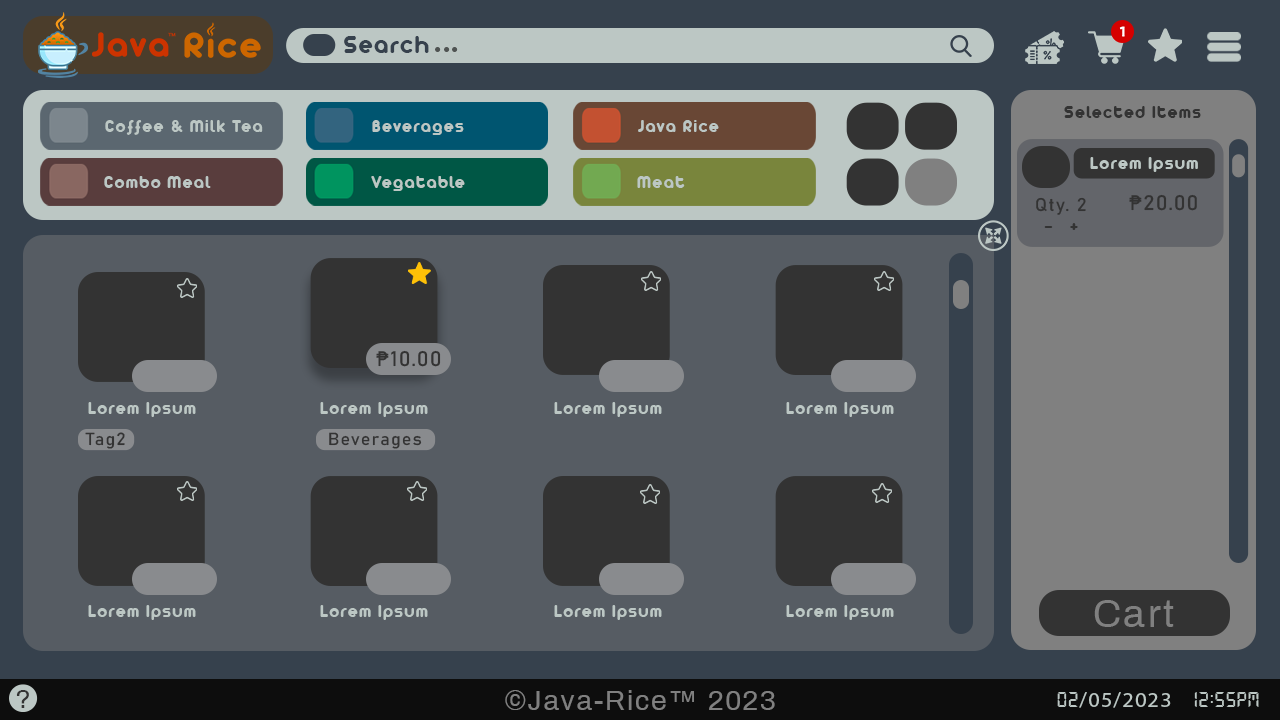
<style>
.page{position:relative;width:1280px;height:720px;background:#565c63}
.page>*{position:absolute;margin:0}
.t1{font:25.7px "Arista";letter-spacing:0.06em;color:#36414d;scale:1.04 1}
.t2{font:37.5px "Arista";letter-spacing:0.06em;color:#4f5352}
.t3{font:18.7px "Arista";letter-spacing:0.06em;color:#333333;scale:1.04 1}
.t4{font:18.7px "Arista";letter-spacing:0.06em;color:#bcc7c4;scale:1.04 1}
.t5{font:18.3px "Bahnschrift";letter-spacing:0.06em;color:#333333;scale:1.04 1}
.t6{font:20.8px "Bahnschrift";letter-spacing:0.06em;color:#333333;scale:1.04 1}
.t7{font:18.3px "Arista";letter-spacing:0.06em;color:#333333;scale:1.04 1}
.t8{font:18.5px "Arista";letter-spacing:0.06em;color:#bcc7c4;scale:1.04 1}
.t9{font:17.4px "Bahnschrift";letter-spacing:0.06em;color:#333333;scale:1.04 1}
.t10{font:37.5px "Archivo-Regular";letter-spacing:0.06em;color:#808080;scale:1.04 1}
.t11{font:26.3px "Archivo-Regular";letter-spacing:0.06em;color:#333333;scale:1.04 1}
.t12{font:27.2px "Archivo-Regular";letter-spacing:0.06em;color:#808080;scale:1.04 1}
.t13{font:21.2px "MyriadPro-Regular";letter-spacing:0.06em;color:#bcc7c4;scale:1.04 1}
.t14{font:21.2px "Technology-Regular";letter-spacing:0.06em;color:#bcc7c4;scale:1.04 1}
</style>
<div class="page">
<p class="t1" style="left:344px;top:36px;width:85px;height:17px">Search</p>
<p class="t2" style="left:435px;top:47px;width:23px;height:5px">...</p>
<p class="t3" style="left:1064px;top:106px;width:137px;height:12px">Selected Items</p>
<p class="t4" style="left:105px;top:120px;width:158px;height:15px">Coffee &amp; Milk Tea</p>
<p class="t4" style="left:372px;top:120px;width:92px;height:15px">Beverages</p>
<p class="t4" style="left:638px;top:120px;width:81px;height:12px">Java Rice</p>
<p class="t4" style="left:1090px;top:157px;width:108px;height:15px">Lorem Ipsum</p>
<p class="t4" style="left:104px;top:176px;width:107px;height:12px">Combo Meal</p>
<p class="t4" style="left:371px;top:176px;width:94px;height:15px">Vegatable</p>
<p class="t4" style="left:637px;top:176px;width:48px;height:12px">Meat</p>
<p class="t5" style="left:1036px;top:197px;width:50px;height:18px">Qty. 2</p>
<p class="t6" style="left:1129px;top:194px;width:68px;height:17px">₱20.00</p>
<p class="t7" style="left:1044px;top:223px;width:34px;height:7px">-   +</p>
<p class="t6" style="left:376px;top:350px;width:65px;height:17px">₱10.00</p>
<p class="t8" style="left:88px;top:402px;width:108px;height:15px">Lorem Ipsum</p>
<p class="t8" style="left:320px;top:402px;width:108px;height:15px">Lorem Ipsum</p>
<p class="t8" style="left:554px;top:402px;width:108px;height:15px">Lorem Ipsum</p>
<p class="t8" style="left:786px;top:402px;width:108px;height:15px">Lorem Ipsum</p>
<p class="t9" style="left:85px;top:432px;width:40px;height:17px">Tag2</p>
<p class="t9" style="left:329px;top:432px;width:93px;height:17px">Beverages</p>
<p class="t8" style="left:88px;top:605px;width:108px;height:15px">Lorem Ipsum</p>
<p class="t8" style="left:320px;top:605px;width:108px;height:15px">Lorem Ipsum</p>
<p class="t8" style="left:554px;top:605px;width:108px;height:15px">Lorem Ipsum</p>
<p class="t8" style="left:786px;top:605px;width:108px;height:15px">Lorem Ipsum</p>
<p class="t10" style="left:1094px;top:600px;width:80px;height:27px">Cart</p>
<p class="t11" style="left:16px;top:690px;width:13px;height:18px">?</p>
<p class="t12" style="left:505px;top:690px;width:270px;height:20px">©Java-Rice™ 2023</p>
<p class="t13" style="left:1057px;top:692px;width:202px;height:16px"><span class="t14">02</span>/05/2023   <span class="t14">12:55Pm</span></p>
</div>
